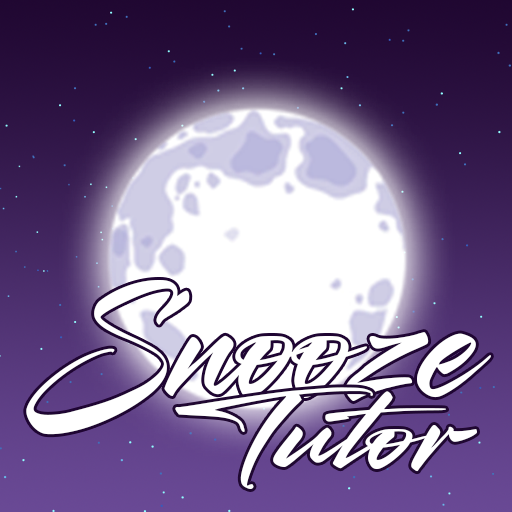
<style>
.page{position:relative;width:512px;height:512px}
.page>*{position:absolute;margin:0}
.t1{font:182.7px "Barett-Street";color:#ffffff}
.t2{font:118.6px "Barett-Street";color:#ffffff;scale:1.26 1}
</style>
<div class="page">
<p class="t1" style="left:26px;top:280px;width:465px;height:155px">Snooze</p>
<p class="t2" style="left:175px;top:387px;width:302px;height:102px">Tutor</p>
</div>
